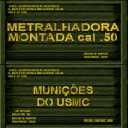
<style>
.page{position:relative;width:128px;height:128px}
.page>*{position:absolute;margin:0}
.t1{font:10.7px/10.7px "Arial-BoldMT";scale:1.24 1}
.t2{font:10.7px/12px "Arial-BoldMT";scale:1.05 1}
</style>
<div class="page">
<p class="t1" style="left:7px;top:23px;width:113px;height:18px;text-align:center">METRALHADORA<br>MONTADA cal .50</p>
<p class="t2" style="left:33px;top:84px;width:60px;height:22px;text-align:center">MUNIÇÕES<br>DO USMC</p>
</div>
